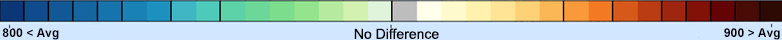
<style>
.page{position:relative;width:782px;height:40px;background:#d1e6ff}
.page>*{position:absolute;margin:0}
.t1{font:12px "Arial-BoldMT";letter-spacing:0.015em;color:#000000}
</style>
<div class="page">
<p class="t1" style="left:2px;top:28px;width:57px;height:12px">800 &lt; Avg</p>
<p class="t1" style="left:724px;top:28px;width:56px;height:12px">900 &gt; Avg</p>
</div>
